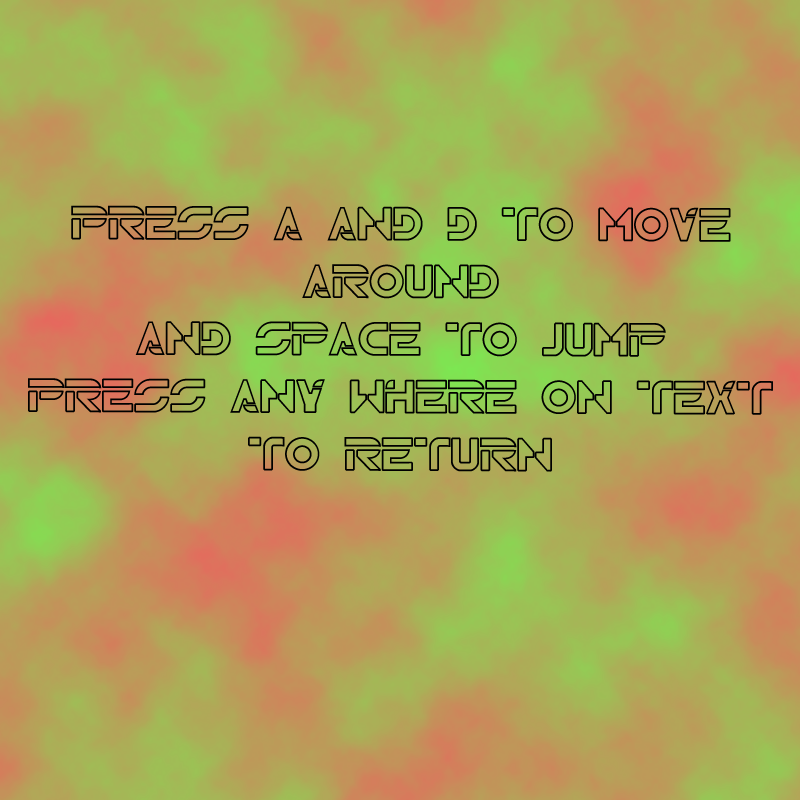
<style>
.page{position:relative;width:800px;height:800px}
.page>*{position:absolute;margin:0}
.t1{font:48px "TRN";color:#000000}
</style>
<div class="page">
<p class="t1" style="left:28px;top:205px;width:745px;height:267px;text-align:center">Press A and D to move Around<br>and space to jump<br>Press any where on text to return</p>
</div>
